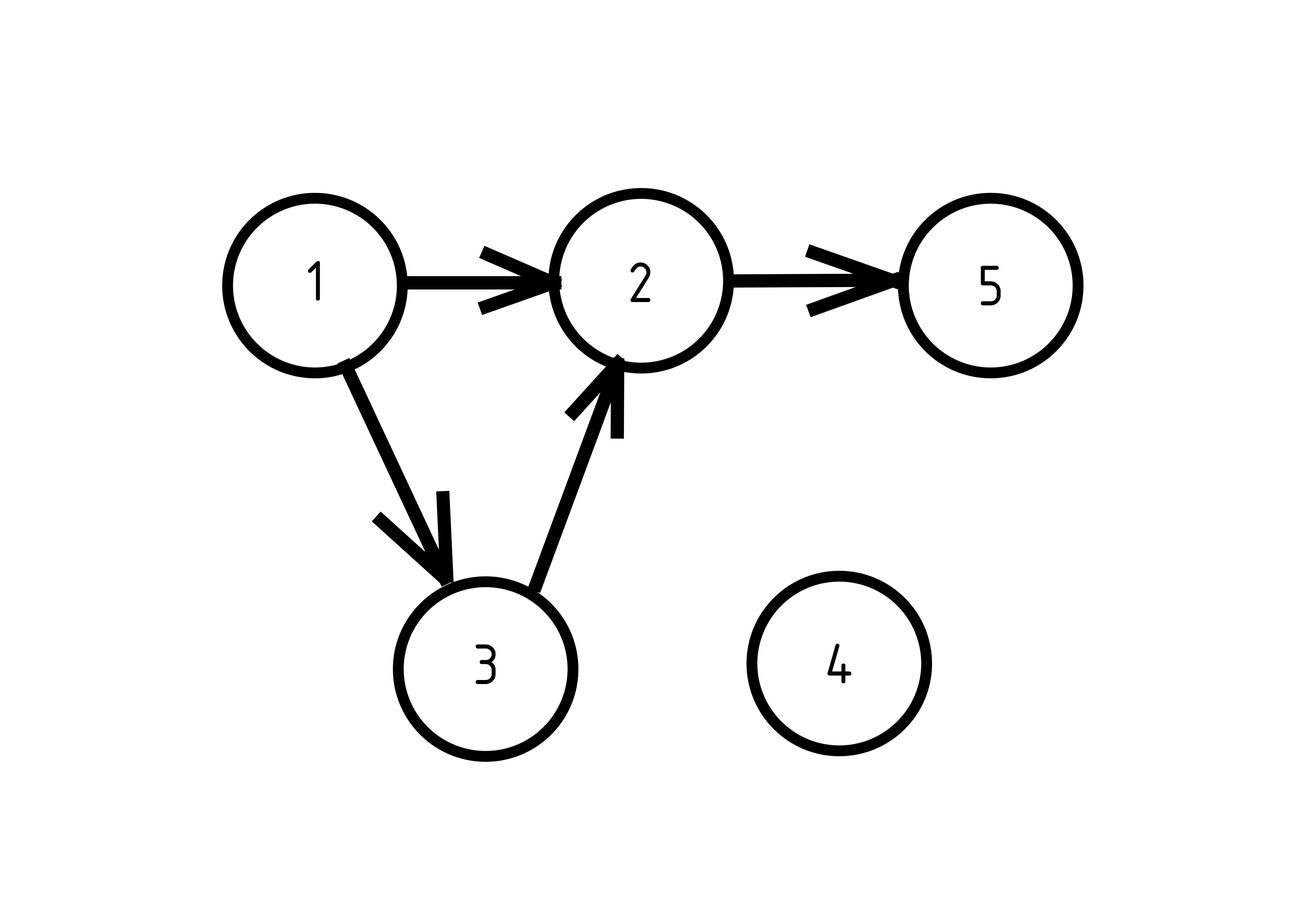
<style>
.page{position:relative;width:1299px;height:918px;background:#ffffff}
.page>*{position:absolute;margin:0}
.t1{font:55.5px "GOST-Common";color:#000000}
</style>
<div class="page">
<p class="t1" style="left:308px;top:261px;width:12px;height:40px">1</p>
<p class="t1" style="left:630px;top:262px;width:20px;height:40px">2</p>
<p class="t1" style="left:980px;top:266px;width:21px;height:39px">5</p>
<p class="t1" style="left:475px;top:645px;width:21px;height:39px">3</p>
<p class="t1" style="left:827px;top:644px;width:25px;height:39px">4</p>
</div>
